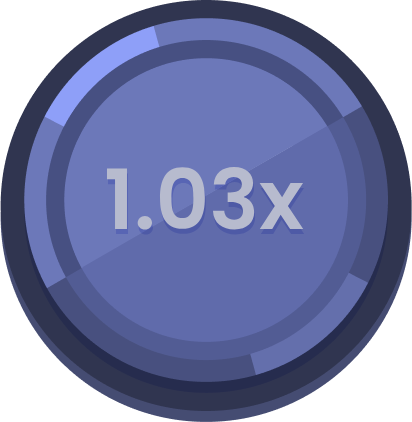
<style>
.page{position:relative;width:412px;height:422px;background:#ffffff}
.page>*{position:absolute;margin:0}
.t1{font:83px "Poppins-SemiBold";color:#b7bbce}
</style>
<div class="page">
<p class="t1" style="left:106px;top:167px;width:198px;height:63px">1.03x</p>
</div>
